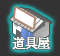
<style>
.page{position:relative;width:60px;height:56px;background:#333333}
.page>*{position:absolute;margin:0}
.t1{font:13px "HeiseiMinStd-W3";color:#ffffff}
</style>
<div class="page">
<p class="t1" style="left:12px;top:37px;width:38px;height:12px">道具屋</p>
</div>
